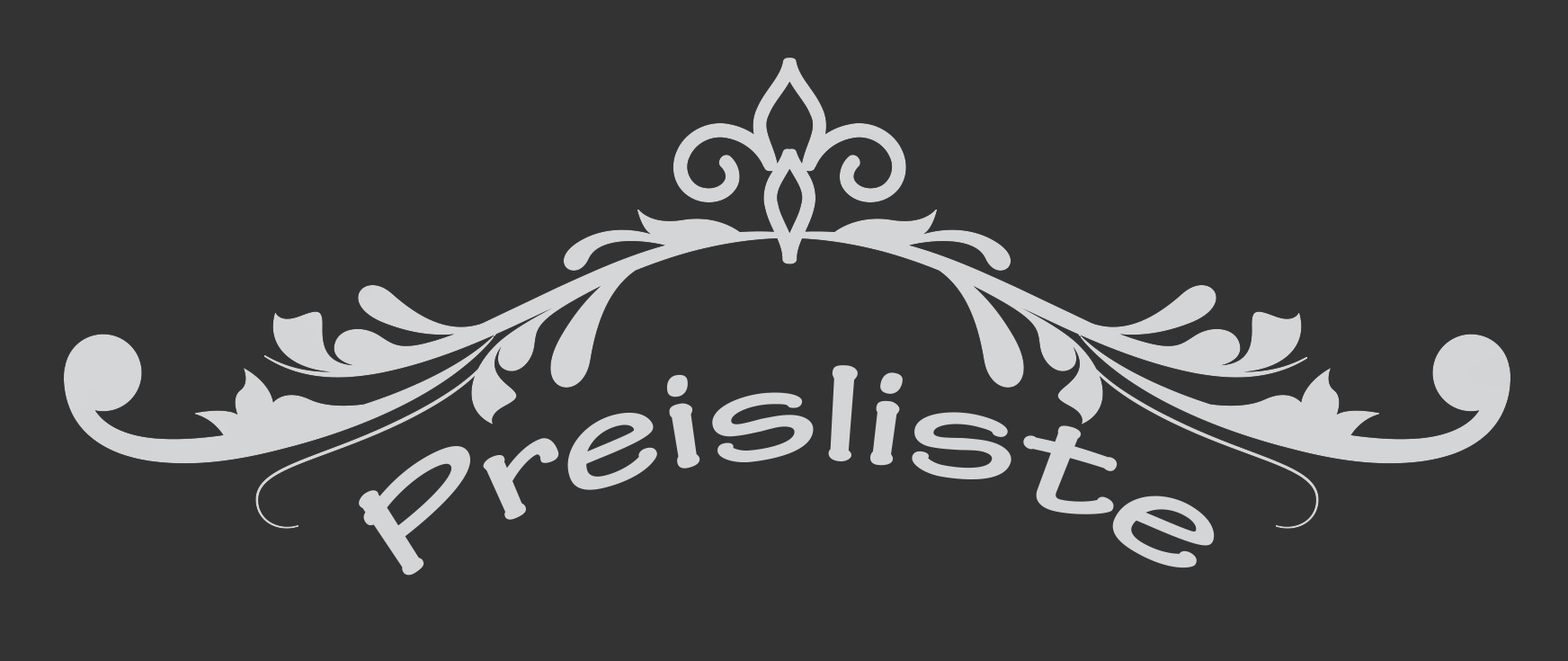
<style>
.page{position:relative;width:1568px;height:661px;background:#333333}
.page>*{position:absolute;margin:0}
.t1{font:146.1px "TektonPro-BoldExt";color:#d4d5d7}
</style>
<div class="page">
<p class="t1" style="left:359px;top:365px;width:856px;height:210px">Preisliste</p>
</div>
